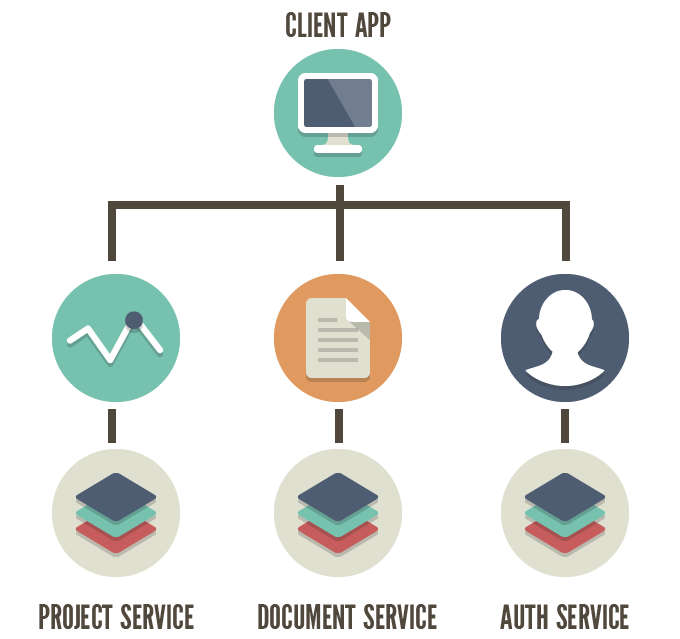
<style>
.page{position:relative;width:680px;height:639px;background:#ffffff}
.page>*{position:absolute;margin:0}
.t1{font:48px "LeagueGothic-Regular";color:#51483d;font-variant:small-caps}
</style>
<div class="page">
<p class="t1" style="left:286px;top:12px;width:105px;height:25px">client app</p>
<p class="t1" style="left:39px;top:604px;width:155px;height:25px">project service</p>
<p class="t1" style="left:258px;top:604px;width:179px;height:25px">document service</p>
<p class="t1" style="left:500px;top:604px;width:129px;height:25px">auth service</p>
</div>
